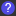
<style>
.page{position:relative;width:16px;height:16px;background:#524ae2}
.page>*{position:absolute;margin:0}
.t1{font:12px "ArialMT";color:#fafafa}
</style>
<div class="page">
<p class="t1" style="left:5px;top:3px;width:6px;height:9px">?</p>
</div>
